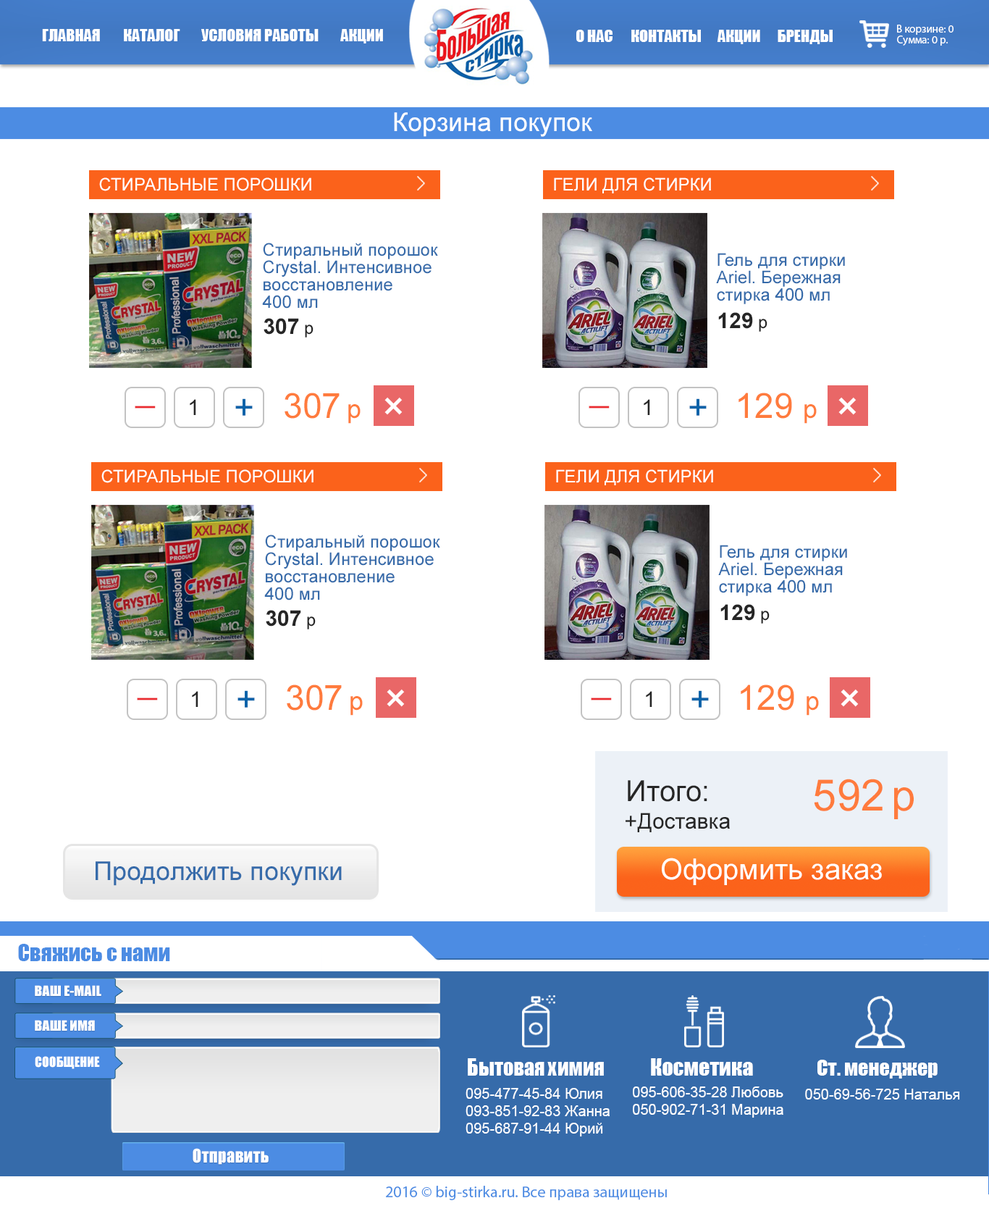
<style>
.page{position:relative;width:989px;height:1206px;background:#ffffff}
.page>*{position:absolute;margin:0}
.t1{font:15.9px "Impact";color:#ffffff}
.t2{font:10.9px "MyriadPro-Regular";color:#ffffff}
.t3{font:26.1px "ArialMT";color:#ffffff}
.t4{font:17.4px "ArialMT";color:#ffffff}
.t5{font:17.4px/6.5px "ArialMT";color:#366baa}
.t6{font:21.7px "Arial-BoldMT";color:#262626}
.t7{font:17.4px "ArialMT";color:#262626}
.t8{font:21.7px "ArialMT";color:#262626}
.t9{font:34.8px "ArialMT";color:#0c63a9}
.t10{font:34.8px "ArialMT";color:#ff7b3d}
.t11{font:26.1px "ArialMT";color:#ff7b3d}
.t12{font:43.4px "ArialMT";color:#ffffff}
.t13{font:34.8px "ArialMT";color:#ea2b30}
.t14{font:29px "ArialMT";color:#262626}
.t15{font:43.4px "ArialMT";color:#ff7b3d}
.t16{font:29px "ArialMT";color:#ffffff}
.t17{font:26.1px "ArialMT";color:#366baa}
.t18{font:21.7px "Impact";color:#4c8ce3}
.t19{font:13px "Impact";color:#ffffff;scale:1.08 1}
.t20{font:13px "Impact";color:#ffffff}
.t21{font:21.7px "Impact";color:#ffffff;scale:0.94 1}
.t22{font:21.7px "Impact";color:#ffffff}
.t23{font:20.3px "Impact";color:#ffffff}
.t24{font:14.5px/17.4px "ArialMT";color:#ffffff}
.t25{font:14.5px "ArialMT";color:#ffffff}
.t26{font:17.4px "Impact";color:#ffffff;scale:0.95 1}
.t27{font:15.9px "MyriadPro-Regular";color:#4c8ce3}
</style>
<div class="page">
<p class="t1" style="left:42px;top:29px;width:341px;height:14px">ГЛАВНАЯ   КАТАЛОГ  УСЛОВИЯ РАБОТЫ      АКЦИИ</p>
<p class="t1" style="left:576px;top:30px;width:257px;height:14px">О НАС  КОНТАКТЫ     АКЦИИ      БРЕНДЫ</p>
<p class="t2" style="left:897px;top:25px;width:57px;height:10px">В корзине: 0</p>
<p class="t2" style="left:897px;top:35px;width:51px;height:11px">Сумма: 0 р.</p>
<p class="t3" style="left:394px;top:112px;width:198px;height:25px">Корзина покупок</p>
<p class="t4" style="left:99px;top:177px;width:212px;height:14px">СТИРАЛЬНЫЕ ПОРОШКИ</p>
<p class="t4" style="left:554px;top:177px;width:157px;height:16px">ГЕЛИ ДЛЯ СТИРКИ</p>
<p class="t5" style="left:262px;top:243px;width:176px;height:65px">Стиральный порошок <br>Crystal. Интенсивное <br>восстановление<br>400 мл</p>
<p class="t5" style="left:716px;top:253px;width:129px;height:51px">Гель для стирки <br>Ariel. Бережная<br>стирка 400 мл</p>
<p class="t6" style="left:264px;top:318px;width:50px;height:19px">307 <span class="t7">р</span></p>
<p class="t6" style="left:718px;top:312px;width:50px;height:20px">129 <span class="t7">р</span></p>
<p class="t8" style="left:190px;top:399px;width:6px;height:16px">1</p>
<p class="t9" style="left:235px;top:398px;width:18px;height:18px">+</p>
<p class="t10" style="left:285px;top:392px;width:76px;height:32px">307 <span class="t11">р</span></p>
<p class="t12" style="left:384px;top:397px;width:19px;height:18px;rotate:-45deg">+</p>
<p class="t8" style="left:644px;top:399px;width:6px;height:16px">1</p>
<p class="t9" style="left:689px;top:398px;width:18px;height:18px">+</p>
<p class="t10" style="left:739px;top:392px;width:78px;height:32px">129 <span class="t11">р</span></p>
<p class="t12" style="left:838px;top:397px;width:19px;height:18px;rotate:-45deg">+</p>
<p class="t13" style="left:135px;top:405px;width:21px;height:3px">_</p>
<p class="t13" style="left:589px;top:405px;width:21px;height:3px">_</p>
<p class="t4" style="left:101px;top:469px;width:213px;height:14px">СТИРАЛЬНЫЕ ПОРОШКИ</p>
<p class="t4" style="left:556px;top:469px;width:157px;height:16px">ГЕЛИ ДЛЯ СТИРКИ</p>
<p class="t5" style="left:264px;top:534px;width:176px;height:66px">Стиральный порошок <br>Crystal. Интенсивное <br>восстановление<br>400 мл</p>
<p class="t5" style="left:718px;top:545px;width:129px;height:51px">Гель для стирки <br>Ariel. Бережная<br>стирка 400 мл</p>
<p class="t6" style="left:720px;top:604px;width:50px;height:19px">129 <span class="t7">р</span></p>
<p class="t6" style="left:266px;top:610px;width:50px;height:19px">307 <span class="t7">р</span></p>
<p class="t10" style="left:287px;top:684px;width:76px;height:31px">307 <span class="t11">р</span></p>
<p class="t12" style="left:387px;top:689px;width:18px;height:18px;rotate:-45deg">+</p>
<p class="t10" style="left:741px;top:684px;width:78px;height:31px">129 <span class="t11">р</span></p>
<p class="t12" style="left:841px;top:689px;width:18px;height:18px;rotate:-45deg">+</p>
<p class="t13" style="left:137px;top:697px;width:21px;height:3px">_</p>
<p class="t8" style="left:192px;top:691px;width:6px;height:16px">1</p>
<p class="t9" style="left:237px;top:690px;width:18px;height:17px">+</p>
<p class="t13" style="left:591px;top:697px;width:21px;height:3px">_</p>
<p class="t8" style="left:646px;top:691px;width:6px;height:16px">1</p>
<p class="t9" style="left:691px;top:690px;width:18px;height:17px">+</p>
<p class="t14" style="left:628px;top:780px;width:79px;height:22px">Итого:</p>
<p class="t15" style="left:814px;top:778px;width:100px;height:41px">592 р</p>
<p class="t8" style="left:626px;top:812px;width:104px;height:20px">+Доставка</p>
<p class="t16" style="left:662px;top:857px;width:220px;height:28px">Оформить заказ</p>
<p class="t17" style="left:96px;top:861px;width:246px;height:25px">Продолжить покупки</p>
<p class="t18" style="left:18px;top:943px;width:152px;height:18px">Свяжись с нами</p>
<p class="t19" style="left:35px;top:985px;width:66px;height:11px">ВАШ E-MAIL</p>
<p class="t19" style="left:35px;top:1019px;width:60px;height:11px">ВАШЕ ИМЯ</p>
<p class="t20" style="left:35px;top:1056px;width:65px;height:13px">СООБЩЕНИЕ</p>
<p class="t21" style="left:468px;top:1058px;width:136px;height:17px">Бытовая химия</p>
<p class="t22" style="left:651px;top:1058px;width:102px;height:17px">Косметика</p>
<p class="t23" style="left:817px;top:1059px;width:121px;height:19px">Ст. менеджер</p>
<p class="t24" style="left:466px;top:1088px;width:144px;height:48px">095-477-45-84 Юлия<br>093-851-92-83 Жанна<br>095-687-91-44 Юрий</p>
<p class="t24" style="left:633px;top:1086px;width:150px;height:31px">095-606-35-28 Любовь         <br>050-902-71-31 Марина</p>
<p class="t25" style="left:805px;top:1088px;width:155px;height:11px">050-69-56-725 Наталья</p>
<p class="t26" style="left:193px;top:1148px;width:76px;height:16px">Отправить</p>
<p class="t27" style="left:386px;top:1185px;width:281px;height:15px">2016 © big-stirka.ru. Все права защищены</p>
</div>
